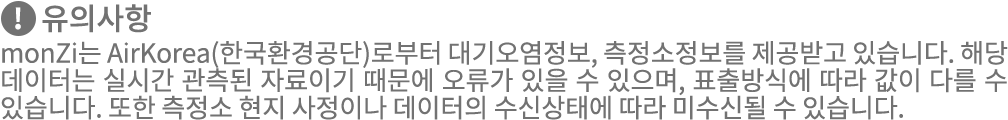
<style>
.page{position:relative;width:1008px;height:120px;background:#ffffff}
.page>*{position:absolute;margin:0}
.t1{font:30.4px "NotoSansCJKkr-Medium";letter-spacing:-0.01em;color:#727272}
.t2{font:28.2px "NotoSansMonoCJKkr-Bold";letter-spacing:-0.01em;color:#ffffff}
.t3{font:26.2px/27.4px "NotoSansCJKkr-Regular";letter-spacing:-0.01em;color:#727272}
</style>
<div class="page">
<p class="t1" style="left:42px;top:4px;width:109px;height:29px">유의사항</p>
<p class="t2" style="left:15px;top:7px;width:6px;height:23px">!</p>
<p class="t3" style="left:1px;top:41px;width:1007px;height:79px;text-align:justify">monZi는 AirKorea(한국환경공단)로부터 대기오염정보, 측정소정보를 제공받고 있습니다. 해당 데이터는 실시간 관측된 자료이기 때문에 오류가 있을 수 있으며, 표출방식에 따라 값이 다를 수 있습니다. 또한 측정소 현지 사정이나 데이터의 수신상태에 따라 미수신될 수 있습니다.</p>
</div>
